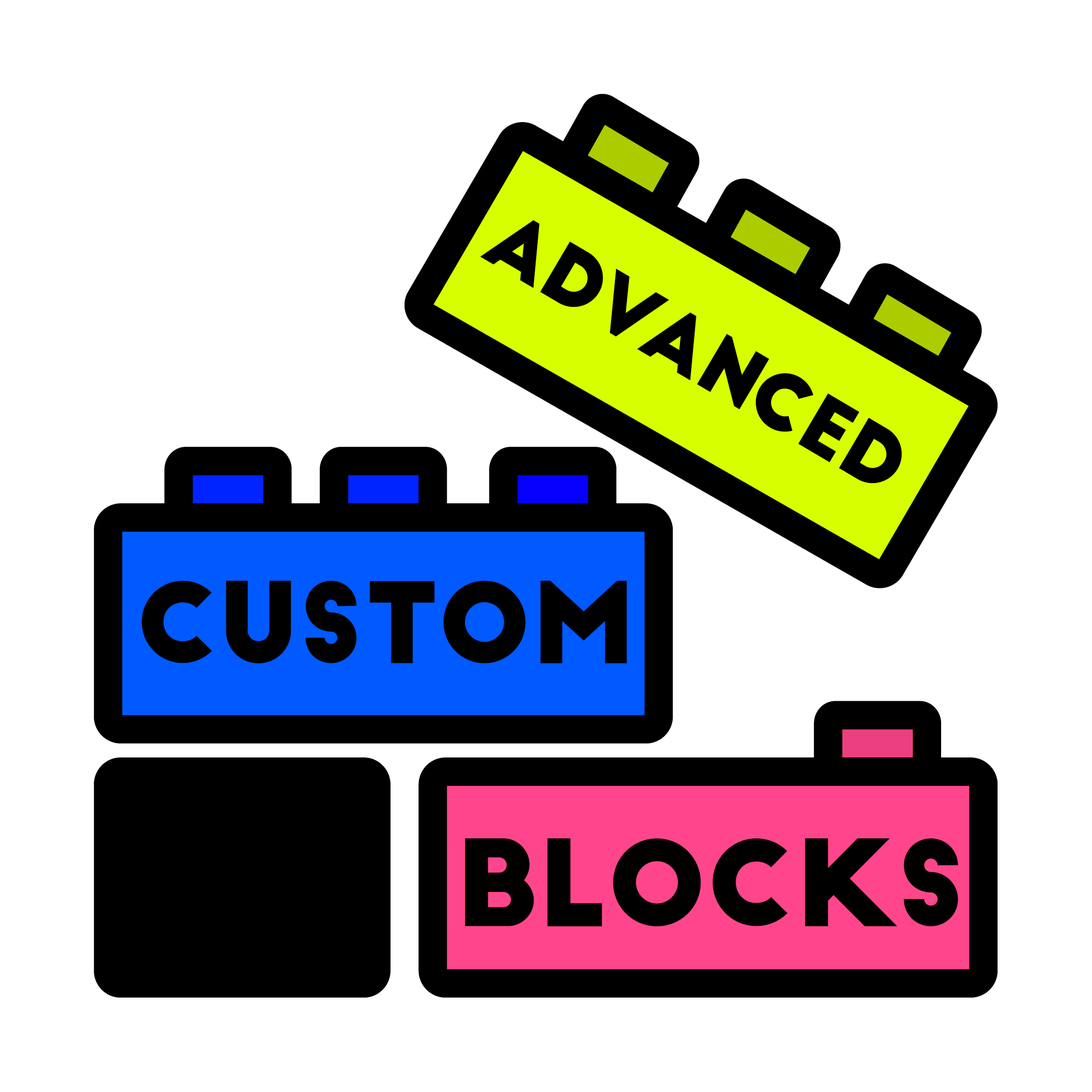
<style>
.page{position:relative;width:1092px;height:1092px;background:#ffffff}
.page>*{position:absolute;margin:0}
.t1{font:77.9px "BigJohn";color:#000000}
.t2{font:109.4px "BigJohn";color:#000000}
.t3{font:116.7px "BigJohn";color:#000000}
</style>
<div class="page">
<p class="t1" style="left:480px;top:220px;width:422px;height:263px;rotate:31deg">Advanced</p>
<p class="t2" style="left:141px;top:580px;width:486px;height:84px">Custom</p>
<p class="t3" style="left:465px;top:838px;width:493px;height:89px">BLOCKS</p>
</div>
